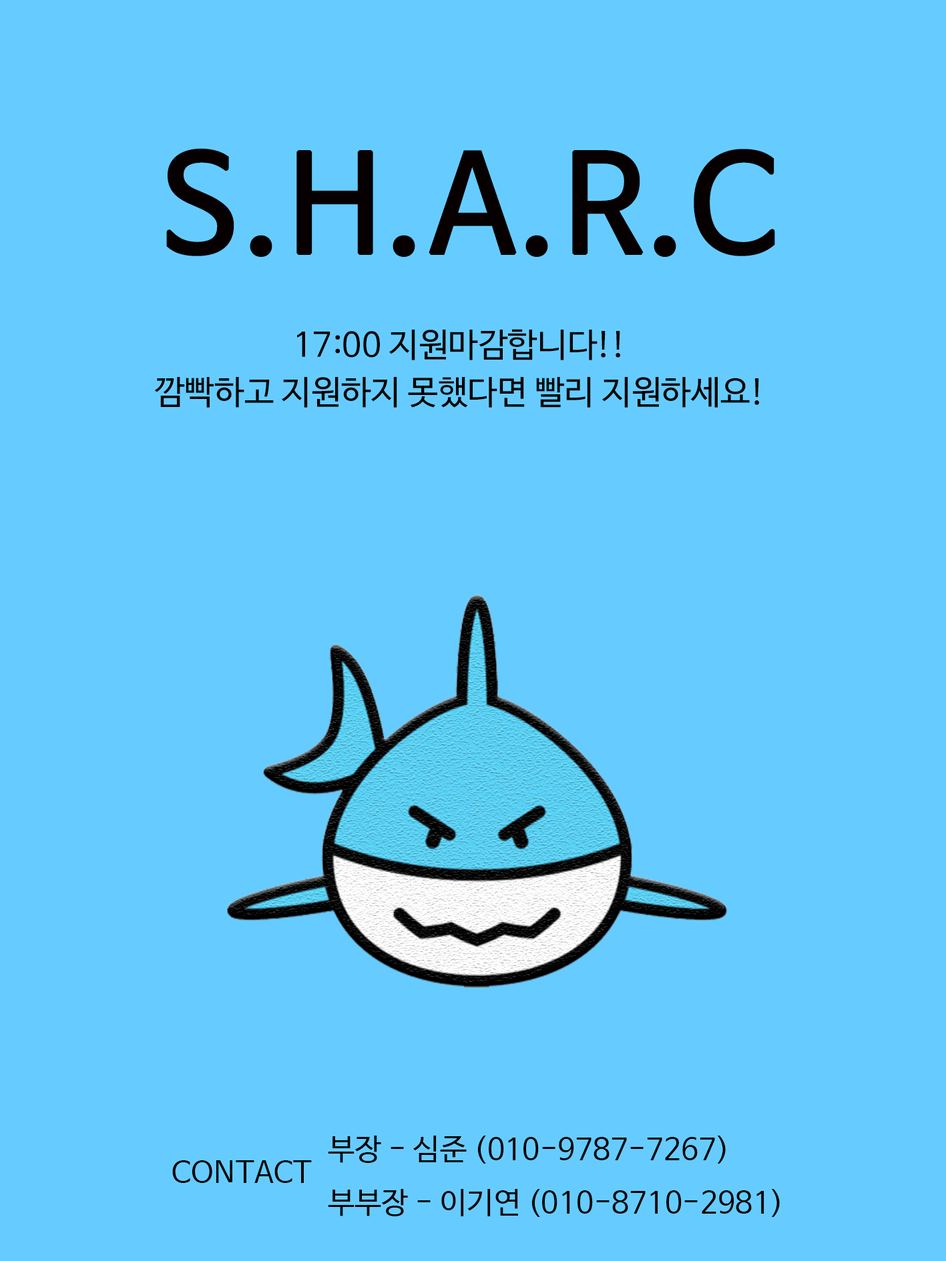
<style>
.page{position:relative;width:946px;height:1261px;background:#66ccff}
.page>*{position:absolute;margin:0}
.t1{font:133.5px "NanumBarunGothic";color:#000000;font-weight:bold}
.t2{font:8px/47.3px "NanumBarunGothic";color:#000000}
.t3{font:30.3px "NanumBarunGothic";color:#000000}
</style>
<div class="page">
<p class="t1" style="left:166px;top:148px;width:609px;height:109px">S.H.A.R.C</p>
<p class="t2" style="left:154px;top:329px;width:605px;height:79px;text-align:center">17:00 지원마감합니다!!<br>깜빡하고 지원하지 못했다면 빨리 지원하세요!</p>
<p class="t3" style="left:328px;top:1136px;width:451px;height:81px">부장 - 심준 (010-9787-7267)<br>부부장 - 이기연 (010-8710-2981)</p>
<p class="t3" style="left:172px;top:1160px;width:140px;height:23px">CONTACT</p>
</div>
